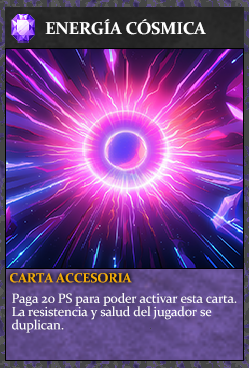
<style>
.page{position:relative;width:249px;height:368px}
.page>*{position:absolute;margin:0}
.t1{font:17.3px "Constantia-Bold";letter-spacing:-0.02em;color:#ffffff}
.t2{font:13.3px "Constantia-Bold";letter-spacing:-0.02em;color:#f2ac05}
.t3{font:13.3px/13.3px "Constantia";letter-spacing:-0.02em;color:#ffffff}
</style>
<div class="page">
<p class="t1" style="left:45px;top:19px;width:161px;height:16px">ENERGÍA CÓSMICA</p>
<p class="t2" style="left:10px;top:273px;width:122px;height:10px">CARTA ACCESORIA</p>
<p class="t3" style="left:12px;top:293px;width:225px;height:40px">Paga 20 PS para poder activar esta carta.<br>La resistencia y salud del jugador se<br>duplican.</p>
</div>
